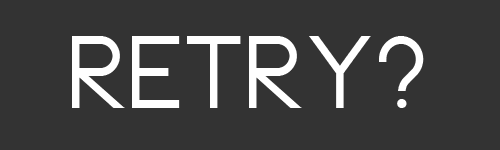
<style>
.page{position:relative;width:500px;height:150px;background:#333333}
.page>*{position:absolute;margin:0}
.t1{font:100px "Neou-Bold";color:#ffffff}
</style>
<div class="page">
<p class="t1" style="left:72px;top:36px;width:352px;height:72px">retry?</p>
</div>
